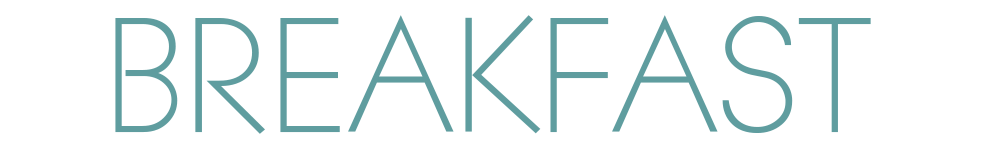
<style>
.page{position:relative;width:1000px;height:143px;background:#ffffff}
.page>*{position:absolute;margin:0}
.t1{font:157.9px "LitheLight";color:#5f9ea0}
</style>
<div class="page">
<p class="t1" style="left:115px;top:15px;width:756px;height:119px">BREAKFAST</p>
</div>
